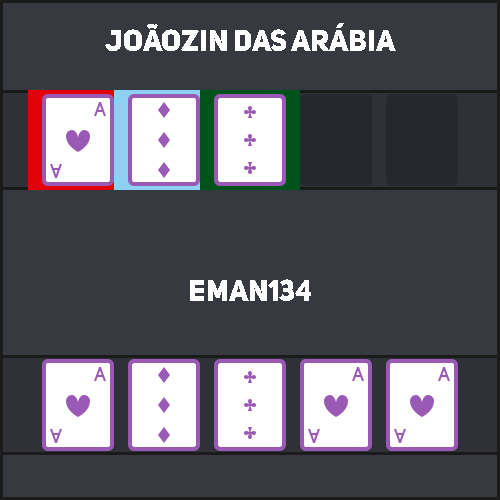
<style>
.page{position:relative;width:500px;height:500px;background:#36393f}
.page>*{position:absolute;margin:0}
.t1{font:30px "UniSans-Heavy";color:#ffffff;text-transform:uppercase}
</style>
<div class="page">
<p class="t1" style="left:105px;top:23px;width:291px;height:28px">joãozin das arábia</p>
<p class="t1" style="left:190px;top:279px;width:121px;height:22px">eman134</p>
</div>
